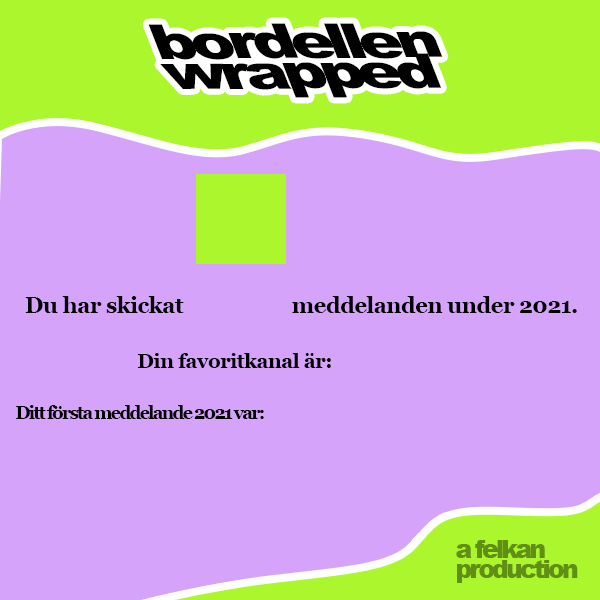
<style>
.page{position:relative;width:600px;height:600px;background:#d6a3fb}
.page>*{position:absolute;margin:0}
.t1{font:51.7px/32.5px "Arial-Black";letter-spacing:-0.1em;color:#000000;scale:1.28 1}
.t2{font:22.2px "Georgia-Bold";letter-spacing:-0.025em;color:#000000}
.t3{font:20.1px "Georgia-Bold";letter-spacing:-0.025em;color:#000000}
.t4{font:18.1px "Georgia-Bold";letter-spacing:-0.1em;color:#000000}
.t5{font:24.6px/20px "Arial-Black";letter-spacing:-0.1em;color:#618e15}
</style>
<div class="page">
<p class="t1" style="left:148px;top:23px;width:295px;height:75px">bordellen<br>wrapped</p>
<p class="t2" style="left:25px;top:296px;width:552px;height:17px">Du har skickat    meddelanden under 2021.</p>
<p class="t3" style="left:137px;top:353px;width:194px;height:15px">Din favoritkanal är:</p>
<p class="t4" style="left:16px;top:405px;width:248px;height:14px">Ditt första meddelande 2021 var:</p>
<p class="t5" style="left:456px;top:540px;width:122px;height:43px">a felkan<br>production</p>
</div>
